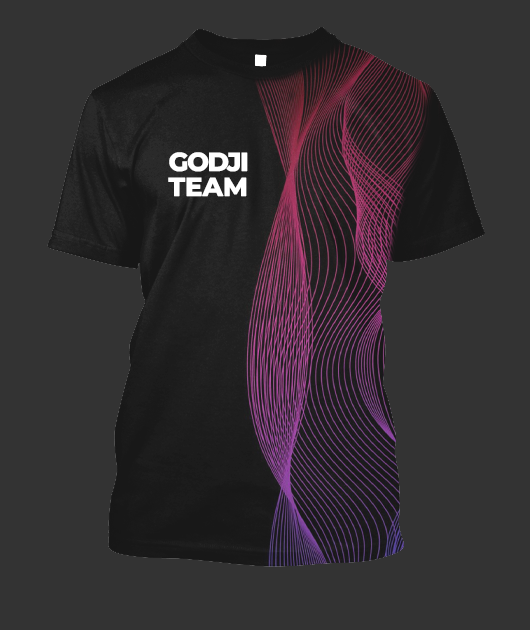
<style>
.page{position:relative;width:530px;height:630px;background:#333333}
.page>*{position:absolute;margin:0}
.t1{font:26.1px/24.3px "MontserratRoman-ExtraBold";letter-spacing:-0.06em;color:#ffffff}
.t2{font:26.1px/24.3px "MontserratRoman-ExtraBold";color:#ffffff}
</style>
<div class="page">
<p class="t1" style="left:168px;top:152px;width:80px;height:45px">GODJI<br><span class="t2">TEAM</span></p>
</div>
